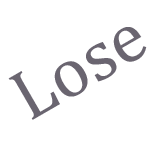
<style>
.page{position:relative;width:151px;height:144px;background:#ffffff}
.page>*{position:absolute;margin:0}
.t1{font:72px "Cambria";color:#6a6570}
.t2{font:72px "Cambria";color:#5a3691}
</style>
<div class="page">
<p class="t1" style="left:8px;top:27px;width:139px;height:93px;rotate:-30deg"><span class="t2"> </span> Lose</p>
</div>
